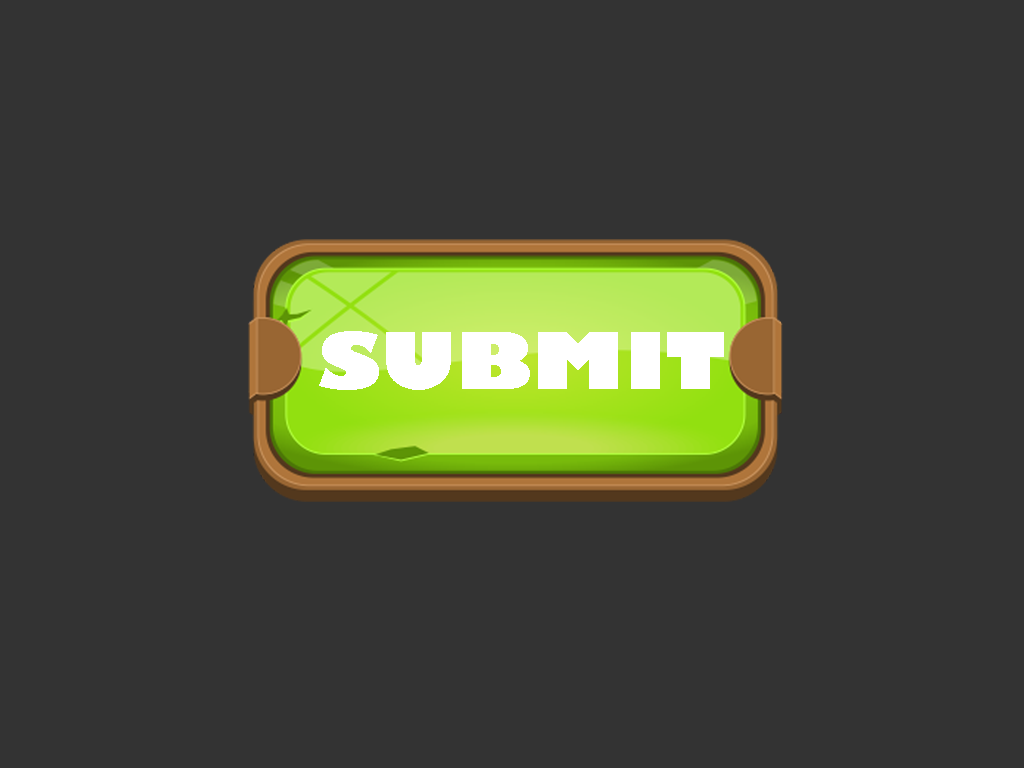
<style>
.page{position:relative;width:1024px;height:768px;background:#333333}
.page>*{position:absolute;margin:0}
.t1{font:77.2px "GillSans-UltraBold";color:#ffffff;scale:1.12 1}
</style>
<div class="page">
<p class="t1" style="left:319px;top:331px;width:405px;height:59px">SUBMIT</p>
</div>
